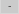
<style>
.page{position:relative;width:19px;height:14px;background:#cbcbcb}
.page>*{position:absolute;margin:0}
.t1{font:12px "Aparajita";scale:1.04 1}
</style>
<div class="page">
<p class="t1" style="left:8px;top:6px;width:3px;height:1px">-</p>
</div>
